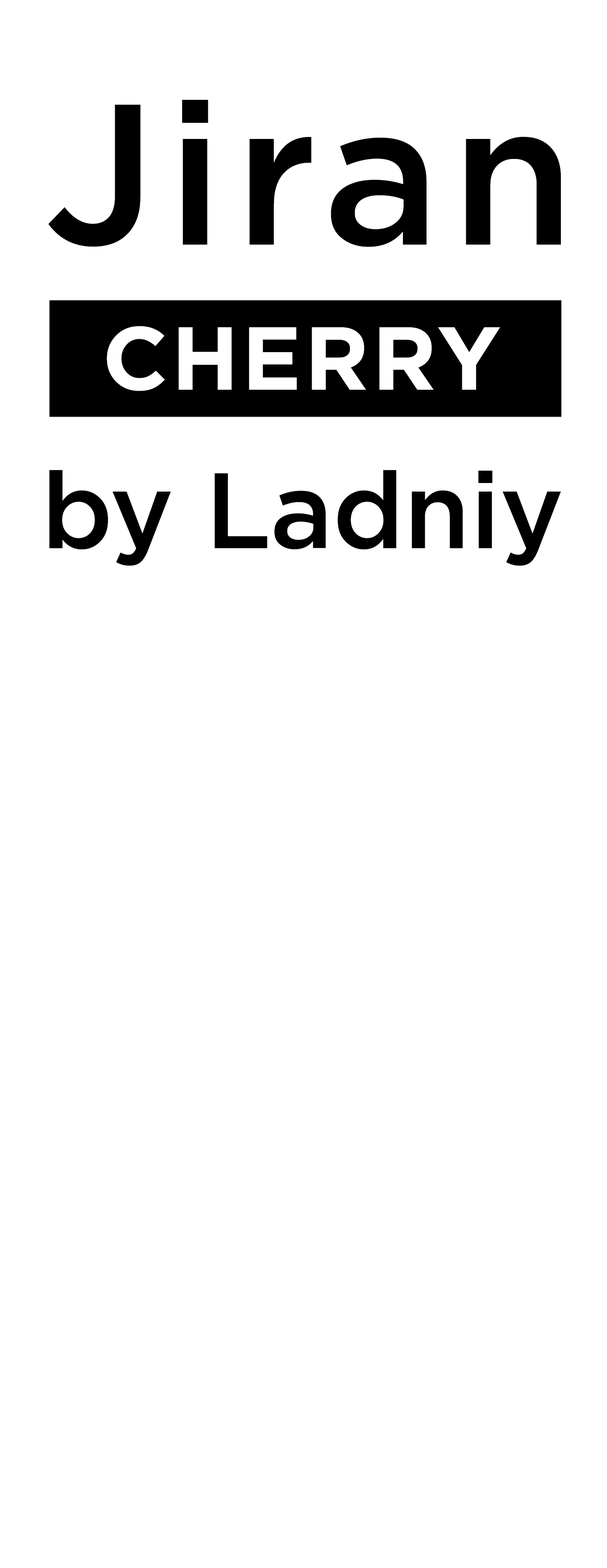
<style>
.page{position:relative;width:607px;height:1568px;background:#ffffff}
.page>*{position:absolute;margin:0}
.t1{font:199.9px "Gotham-Medium";letter-spacing:0.054em;color:#000000}
.t2{font:89.2px "Gotham-Bold";letter-spacing:0.033em;color:#ffffff}
.t3{font:107.1px "Gotham-Medium";letter-spacing:-0.005em;color:#000000}
</style>
<div class="page">
<p class="t1" style="left:48px;top:99px;width:513px;height:148px">Jiran</p>
<p class="t2" style="left:107px;top:326px;width:393px;height:65px">CHERRY</p>
<p class="t3" style="left:49px;top:470px;width:512px;height:96px">by Ladniy</p>
</div>
